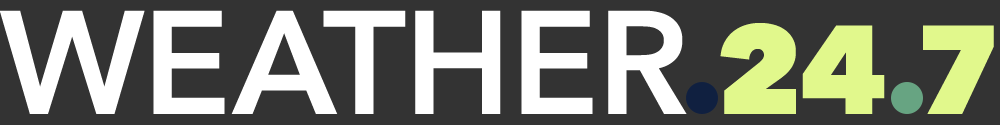
<style>
.page{position:relative;width:1000px;height:125px;background:#333333}
.page>*{position:absolute;margin:0}
.t1{font:145.8px "AvenirNext-DemiBold";color:#ffffff;text-transform:uppercase}
.t2{font:125px "AvenirNext-Heavy";color:#e1f88c;text-transform:uppercase}
</style>
<div class="page">
<p class="t1" style="left:0px;top:10px;width:687px;height:104px">Weather</p>
<p class="t2" style="left:720px;top:23px;width:165px;height:91px">24</p>
<p class="t2" style="left:923px;top:25px;width:71px;height:89px">7</p>
</div>
